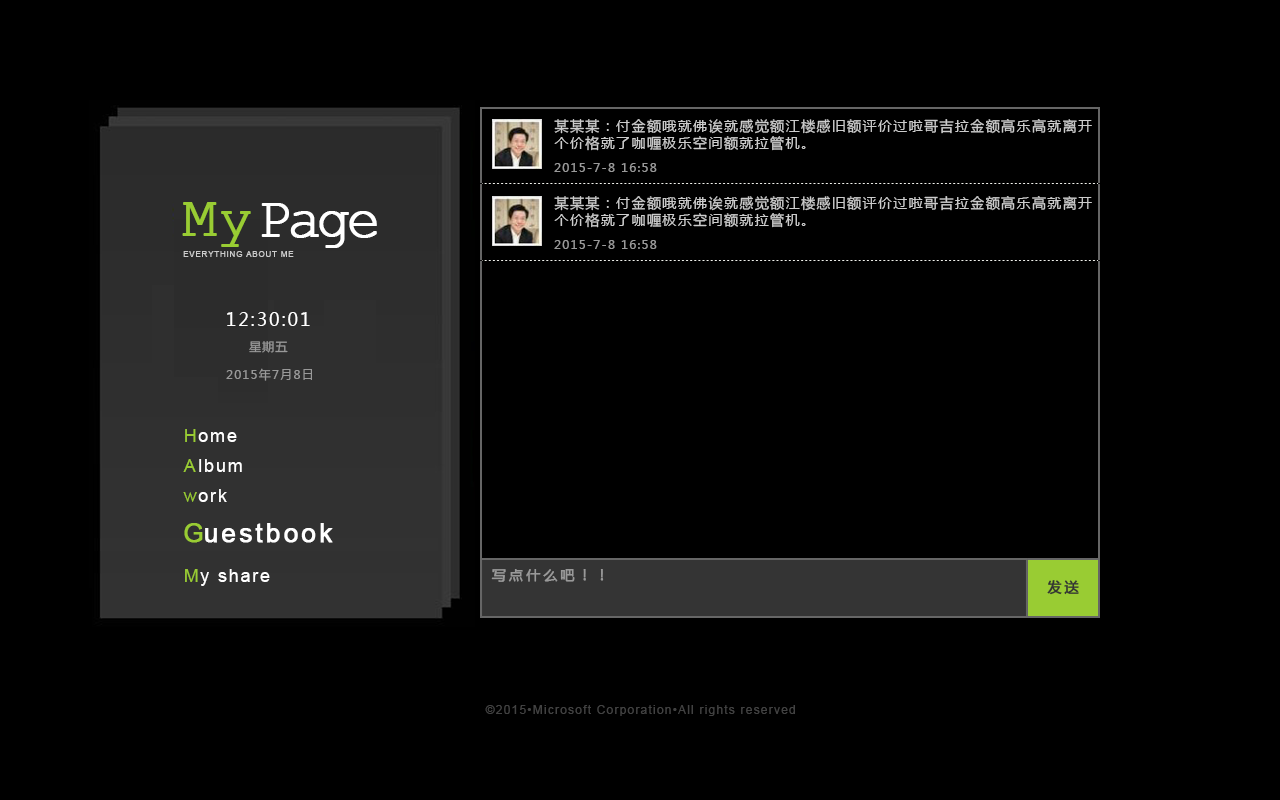
<style>
.page{position:relative;width:1280px;height:800px;background:#000000}
.page>*{position:absolute;margin:0}
.t1{font:14px "MicrosoftYaHei";letter-spacing:0.1em;color:#cccccc}
.t2{font:12px "MicrosoftYaHei";letter-spacing:0.1em;color:#999999}
.t3{font:56px "CourierNewPSMT";color:#99cc33;font-weight:bold}
.t4{font:56px "CourierNewPSMT";letter-spacing:-0.1em;color:#ffffff;font-weight:bold}
.t5{font:8px "ArialMT";letter-spacing:0.1em;color:#cccccc}
.t6{font:18px "MicrosoftYaHei";letter-spacing:0.1em;color:#ffffff}
.t7{font:18px "ArialMT";letter-spacing:0.1em;color:#99cc33}
.t8{font:18px "ArialMT";letter-spacing:0.1em;color:#ffffff}
.t9{font:26px "ArialMT";letter-spacing:0.1em;color:#99cc33;font-weight:bold}
.t10{font:26px "ArialMT";letter-spacing:0.1em;color:#ffffff;font-weight:bold}
.t11{font:14px "MicrosoftYaHei";letter-spacing:0.2em;color:#999999;font-weight:bold}
.t12{font:14px "MicrosoftYaHei";letter-spacing:0.2em;color:#333333;font-weight:bold}
.t13{font:12px "ArialMT";letter-spacing:0.1em;color:#424242}
</style>
<div class="page">
<p class="t1" style="left:554px;top:119px;width:538px;height:32px">某某某：付金额哦就佛诶就感觉额江楼感旧额评价过啦哥吉拉金额高乐高就离开<br>个价格就了咖喱极乐空间额就拉管机。</p>
<p class="t2" style="left:554px;top:163px;width:103px;height:9px">2015-7-8 16:58</p>
<p class="t1" style="left:554px;top:196px;width:538px;height:32px">某某某：付金额哦就佛诶就感觉额江楼感旧额评价过啦哥吉拉金额高乐高就离开<br>个价格就了咖喱极乐空间额就拉管机。</p>
<p class="t3" style="left:182px;top:202px;width:69px;height:45px">My</p>
<p class="t4" style="left:261px;top:203px;width:116px;height:45px">Page</p>
<p class="t2" style="left:554px;top:240px;width:103px;height:9px">2015-7-8 16:58</p>
<p class="t5" style="left:183px;top:251px;width:111px;height:6px">EVERYTHING ABOUT ME</p>
<p class="t6" style="left:227px;top:312px;width:83px;height:14px">12:30:01</p>
<p class="t2" style="left:249px;top:341px;width:39px;height:12px">星期五</p>
<p class="t2" style="left:226px;top:368px;width:86px;height:13px">2015年7月8日</p>
<p class="t7" style="left:185px;top:429px;width:11px;height:13px">H</p>
<p class="t8" style="left:198px;top:432px;width:39px;height:10px">ome</p>
<p class="t7" style="left:183px;top:459px;width:13px;height:13px">A</p>
<p class="t8" style="left:199px;top:459px;width:43px;height:13px">lbum</p>
<p class="t7" style="left:183px;top:492px;width:14px;height:10px">w</p>
<p class="t8" style="left:198px;top:489px;width:29px;height:13px">ork</p>
<p class="t9" style="left:184px;top:523px;width:19px;height:20px">G</p>
<p class="t10" style="left:205px;top:523px;width:128px;height:20px">uestbook</p>
<p class="t7" style="left:185px;top:569px;width:13px;height:13px">M</p>
<p class="t8" style="left:200px;top:569px;width:70px;height:17px">y share</p>
<p class="t11" style="left:491px;top:569px;width:113px;height:13px">写点什么吧！！</p>
<p class="t12" style="left:1047px;top:580px;width:32px;height:15px">发送</p>
<p class="t13" style="left:485px;top:705px;width:310px;height:11px">©2015•Microsoft Corporation•All rights reserved</p>
</div>
